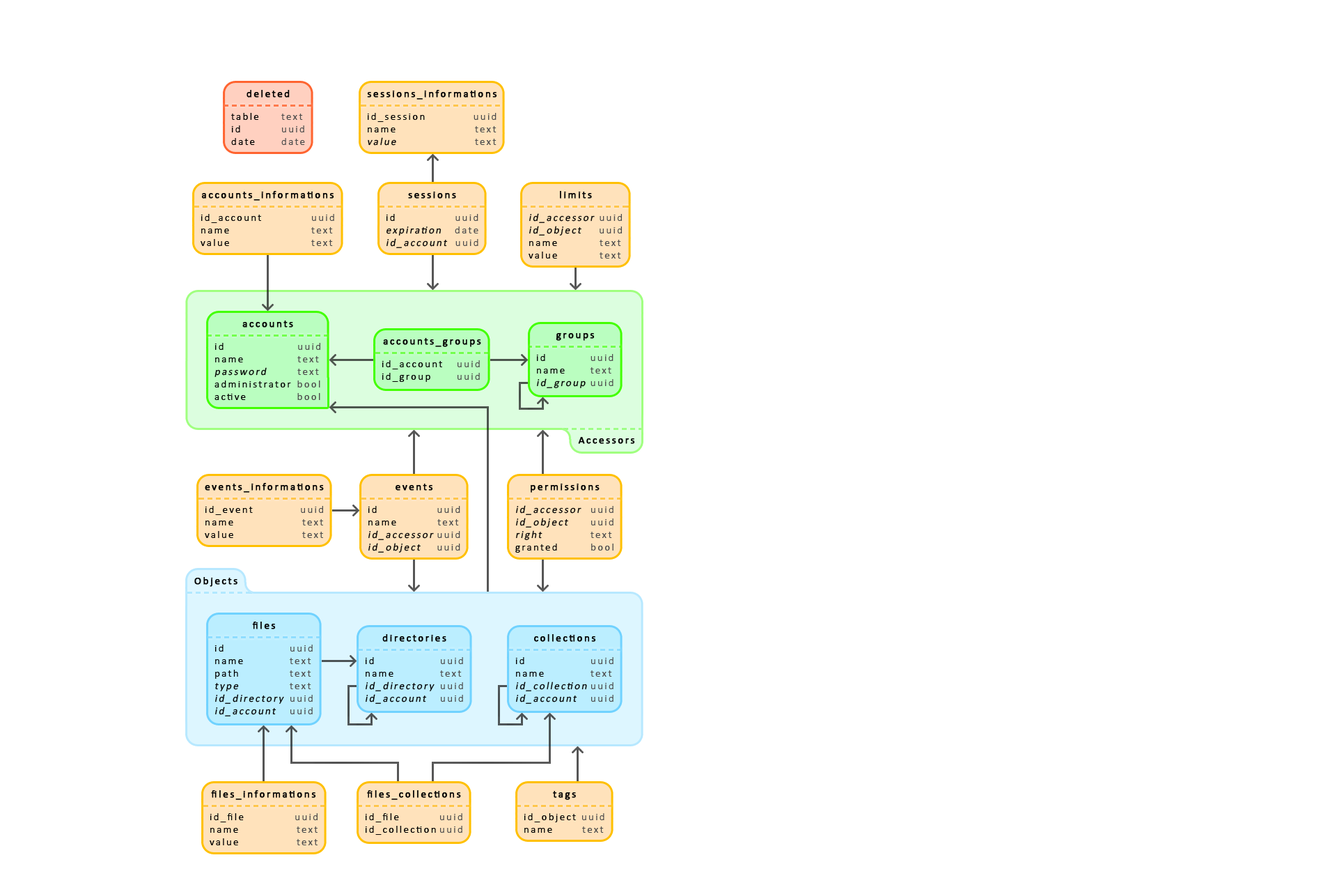
<style>
.page{position:relative;width:1337px;height:892px;background:#ffffff}
.page>*{position:absolute;margin:0}
.t1{font:10.4px "Calibri";letter-spacing:0.15em;color:#000000;font-weight:bold}
.t2{font:10.4px "Calibri";letter-spacing:0.15em;color:#000000}
.t3{font:10.4px "Calibri";letter-spacing:0.15em;color:#4d4d4d}
.t4{font:10.4px "Calibri";letter-spacing:0.15em;color:#000000;font-style:italic}
</style>
<div class="page">
<p class="t1" style="left:247px;top:90px;width:43px;height:8px">deleted</p>
<p class="t1" style="left:367px;top:90px;width:130px;height:10px">sessions_informations</p>
<p class="t2" style="left:231px;top:113px;width:74px;height:32px">table <span class="t3">text<br></span>id  <span class="t3">uuid<br></span>date <span class="t3">date</span></p>
<p class="t2" style="left:367px;top:113px;width:130px;height:33px">id_session      <span class="t3">uuid<br></span>name            <span class="t3">text<br></span><span class="t4">value            </span><span class="t3">text</span></p>
<p class="t1" style="left:201px;top:191px;width:133px;height:10px">accounts_informations</p>
<p class="t1" style="left:408px;top:192px;width:48px;height:7px">sessions</p>
<p class="t1" style="left:560px;top:191px;width:32px;height:8px">limits</p>
<p class="t2" style="left:201px;top:214px;width:133px;height:32px">id_account     <span class="t3">uuid<br></span>name      <span class="t3">text<br></span>value      <span class="t3">text</span></p>
<p class="t4" style="left:386px;top:214px;width:93px;height:34px"><span class="t2">id       </span><span class="t3">uuid<br></span>expiration    <span class="t3">date<br></span>id_account   <span class="t3">uuid</span></p>
<p class="t4" style="left:529px;top:213px;width:93px;height:45px">id_accessor <span class="t3">uuid<br></span>id_object    <span class="t3">uuid<br></span><span class="t2">name       </span><span class="t3">text<br></span><span class="t2">value       </span><span class="t3">text</span></p>
<p class="t1" style="left:242px;top:320px;width:51px;height:7px">accounts</p>
<p class="t1" style="left:383px;top:338px;width:98px;height:9px">accounts_groups</p>
<p class="t1" style="left:556px;top:333px;width:39px;height:8px">groups</p>
<p class="t2" style="left:215px;top:343px;width:105px;height:57px">id     <span class="t3">uuid<br></span>name    <span class="t3">text<br></span><span class="t4">password   </span><span class="t3">text<br></span>administrator  <span class="t3">bool<br></span>active     <span class="t3">bool</span></p>
<p class="t4" style="left:536px;top:354px;width:78px;height:34px"><span class="t2">id   </span><span class="t3">uuid<br></span><span class="t2">name  </span><span class="t3">text<br></span>id_group <span class="t3">uuid</span></p>
<p class="t2" style="left:382px;top:360px;width:98px;height:22px">id_account <span class="t3">uuid<br></span>id_group <span class="t3">uuid</span></p>
<p class="t1" style="left:578px;top:437px;width:57px;height:7px">Accessors</p>
<p class="t1" style="left:205px;top:483px;width:119px;height:9px">events_informations</p>
<p class="t1" style="left:396px;top:483px;width:37px;height:7px">events</p>
<p class="t1" style="left:531px;top:483px;width:69px;height:9px">permissions</p>
<p class="t2" style="left:205px;top:506px;width:118px;height:32px">id_event        <span class="t3">uuid<br></span>name        <span class="t3">text<br></span>value        <span class="t3">text</span></p>
<p class="t4" style="left:368px;top:506px;width:92px;height:46px"><span class="t2">id       </span><span class="t3">uuid<br></span><span class="t2">name      </span><span class="t3">text<br></span>id_accessor <span class="t3">uuid<br></span>id_object    <span class="t3">uuid</span></p>
<p class="t4" style="left:515px;top:505px;width:99px;height:47px">id_accessor <span class="t3">uuid<br></span>id_object <span class="t3">uuid<br></span>right  <span class="t3">text<br></span><span class="t2">granted  </span><span class="t3">bool</span></p>
<p class="t1" style="left:194px;top:577px;width:44px;height:10px">Objects</p>
<p class="t1" style="left:252px;top:621px;width:24px;height:8px">files</p>
<p class="t1" style="left:382px;top:634px;width:64px;height:8px">directories</p>
<p class="t1" style="left:534px;top:634px;width:62px;height:8px">collections</p>
<p class="t4" style="left:215px;top:644px;width:98px;height:72px"><span class="t2">id   </span><span class="t3">uuid<br></span><span class="t2">name  </span><span class="t3">text<br></span><span class="t2">path  </span><span class="t3">text<br></span>type  <span class="t3">text<br></span>id_directory <span class="t3">uuid<br></span>id_account <span class="t3">uuid</span></p>
<p class="t4" style="left:365px;top:657px;width:98px;height:47px"><span class="t2">id   </span><span class="t3">uuid<br></span><span class="t2">name  </span><span class="t3">text<br></span>id_directory <span class="t3">uuid<br></span>id_account <span class="t3">uuid</span></p>
<p class="t4" style="left:515px;top:657px;width:99px;height:47px"><span class="t2">id   </span><span class="t3">uuid<br></span><span class="t2">name  </span><span class="t3">text<br></span>id_collection <span class="t3">uuid<br></span>id_account <span class="t3">uuid</span></p>
<p class="t1" style="left:211px;top:790px;width:105px;height:10px">files_informations</p>
<p class="t1" style="left:367px;top:790px;width:94px;height:10px">files_collections</p>
<p class="t1" style="left:553px;top:791px;width:23px;height:9px">tags</p>
<p class="t2" style="left:210px;top:813px;width:108px;height:32px">id_file     <span class="t3">uuid<br></span>name     <span class="t3">text<br></span>value     <span class="t3">text</span></p>
<p class="t2" style="left:365px;top:813px;width:98px;height:21px">id_file        <span class="t3">uuid<br></span>id_collection <span class="t3">uuid</span></p>
<p class="t2" style="left:524px;top:813px;width:81px;height:19px">id_object <span class="t3">uuid<br></span>name    <span class="t3">text</span></p>
</div>
